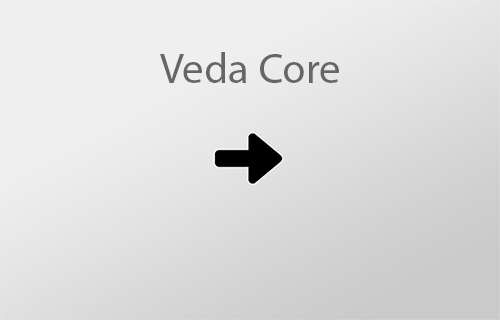
<style>
.page{position:relative;width:500px;height:320px}
.page>*{position:absolute;margin:0}
.t1{font:42.9px "MyriadPro-Regular";color:#666666}
</style>
<div class="page">
<p class="t1" style="left:160px;top:52px;width:179px;height:31px">Veda Core</p>
</div>
